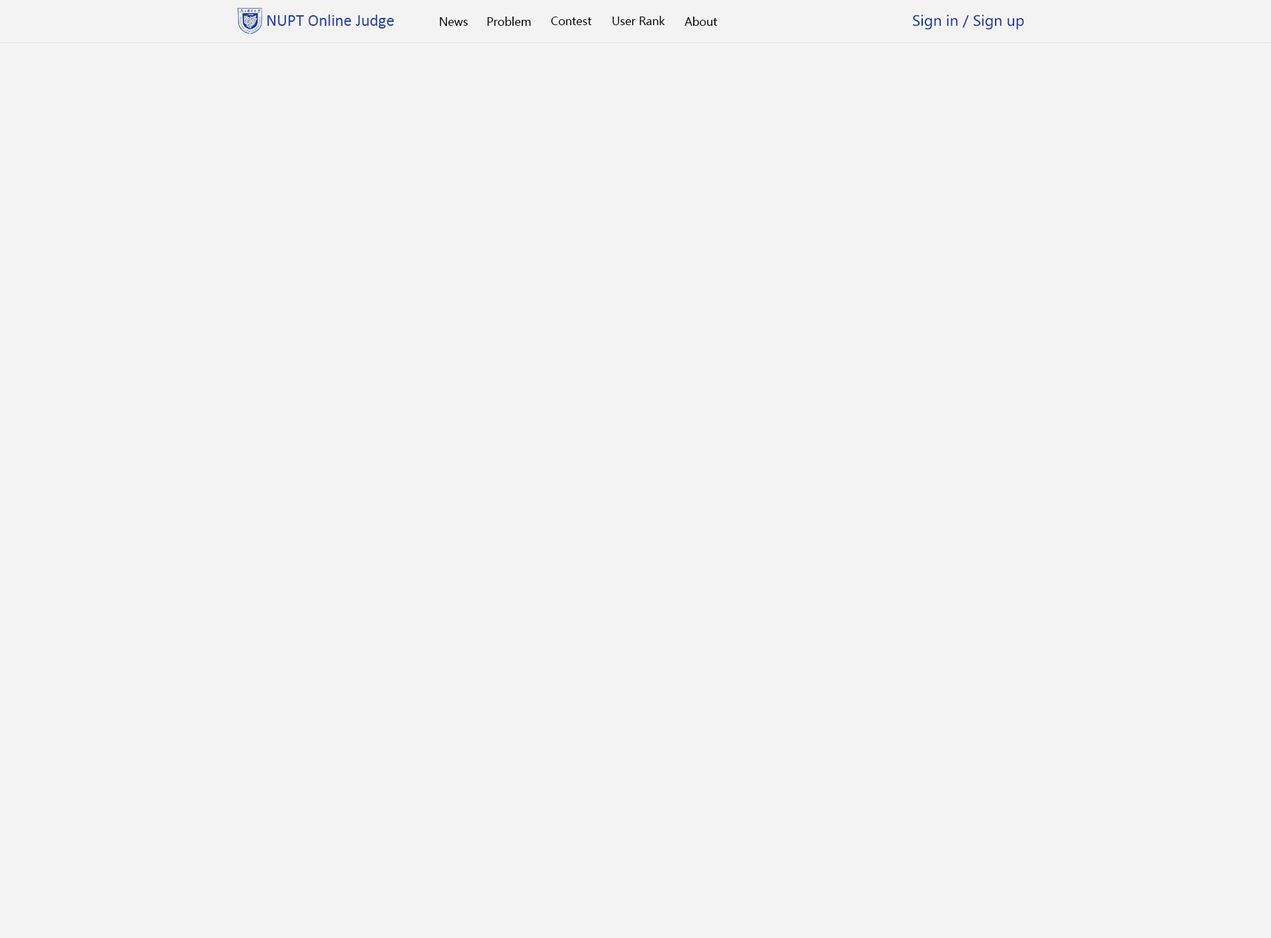
<style>
.page{position:relative;width:1271px;height:938px;background:#f3f3f3}
.page>*{position:absolute;margin:0}
.t1{font:16.6px "Calibri";color:#22409a}
.t2{font:11px "MicrosoftYaHei";color:#000000}
.t3{font:14.1px "MicrosoftYaHei";color:#1a3795}
</style>
<div class="page">
<p class="t1" style="left:267px;top:15px;width:127px;height:13px">NUPT Online Judge</p>
<p class="t2" style="left:440px;top:17px;width:28px;height:9px">News</p>
<p class="t2" style="left:487px;top:17px;width:44px;height:9px">Problem</p>
<p class="t2" style="left:551px;top:17px;width:41px;height:8px">Contest</p>
<p class="t2" style="left:612px;top:16px;width:53px;height:9px">User Rank</p>
<p class="t2" style="left:685px;top:17px;width:33px;height:9px">About</p>
<p class="t3" style="left:913px;top:15px;width:111px;height:15px">Sign in / Sign up</p>
</div>
